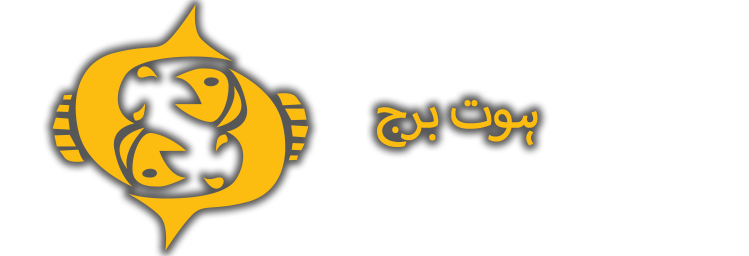
<style>
.page{position:relative;width:749px;height:256px;background:#ffffff}
.page>*{position:absolute;margin:0}
.t1{font:70.8px "MyriadArabic-Regular";letter-spacing:-0.05em;color:#fcbc10;text-transform:uppercase;font-weight:bold}
</style>
<div class="page">
<p class="t1" style="left:377px;top:100px;width:161px;height:47px">ہوت برج</p>
</div>
